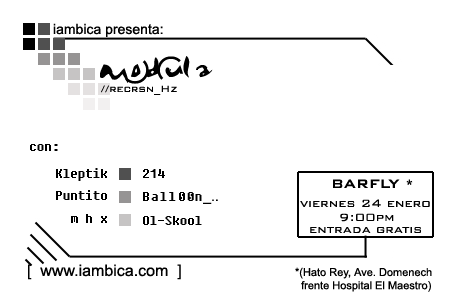
<style>
.page{position:relative;width:450px;height:300px;background:#ffffff}
.page>*{position:absolute;margin:0}
.t1{font:14px "ArialMT";color:#000000}
.t2{font:42px "EnyaPlain";color:#000000}
.t3{font:12px "BankGothicBT-Light";color:#000000}
.t4{font:12px "Fixedsys";color:#000000}
.t5{font:16px "BankGothicBT-Medium";color:#000000}
.t6{font:14px "Fixedsys";color:#000000}
.t7{font:14px "BankGothicBT-Light";color:#000000}
.t8{font:16px "ArialMT";color:#000000}
.t9{font:11px "ArialMT";color:#000000}
</style>
<div class="page">
<p class="t1" style="left:53px;top:23px;width:110px;height:14px">iambica presenta:</p>
<p class="t2" style="left:100px;top:56px;width:113px;height:27px">modula</p>
<p class="t3" style="left:101px;top:85px;width:76px;height:10px">//recrsn_Hz</p>
<p class="t4" style="left:30px;top:144px;width:28px;height:7px">con:</p>
<p class="t4" style="left:56px;top:168px;width:51px;height:13px">Kleptik</p>
<p class="t4" style="left:143px;top:169px;width:22px;height:9px">214</p>
<p class="t5" style="left:333px;top:179px;width:80px;height:9px">BARFLY *</p>
<p class="t4" style="left:56px;top:190px;width:51px;height:10px">Puntito</p>
<p class="t6" style="left:143px;top:192px;width:75px;height:12px">Ball00n<span class="t1">_..</span></p>
<p class="t7" style="left:300px;top:199px;width:130px;height:8px">viernes 24 enero</p>
<p class="t4" style="left:71px;top:214px;width:36px;height:9px">m h x</p>
<p class="t4" style="left:143px;top:216px;width:59px;height:9px">Ol-Skool</p>
<p class="t7" style="left:340px;top:213px;width:54px;height:9px">9:00pm</p>
<p class="t7" style="left:310px;top:227px;width:111px;height:6px">entrada gratis</p>
<p class="t8" style="left:28px;top:264px;width:153px;height:16px">[  www.iambica.com  ]</p>
<p class="t9" style="left:295px;top:267px;width:137px;height:25px">*(Hato Rey, Ave. Domenech<br>  frente Hospital El Maestro)</p>
</div>
